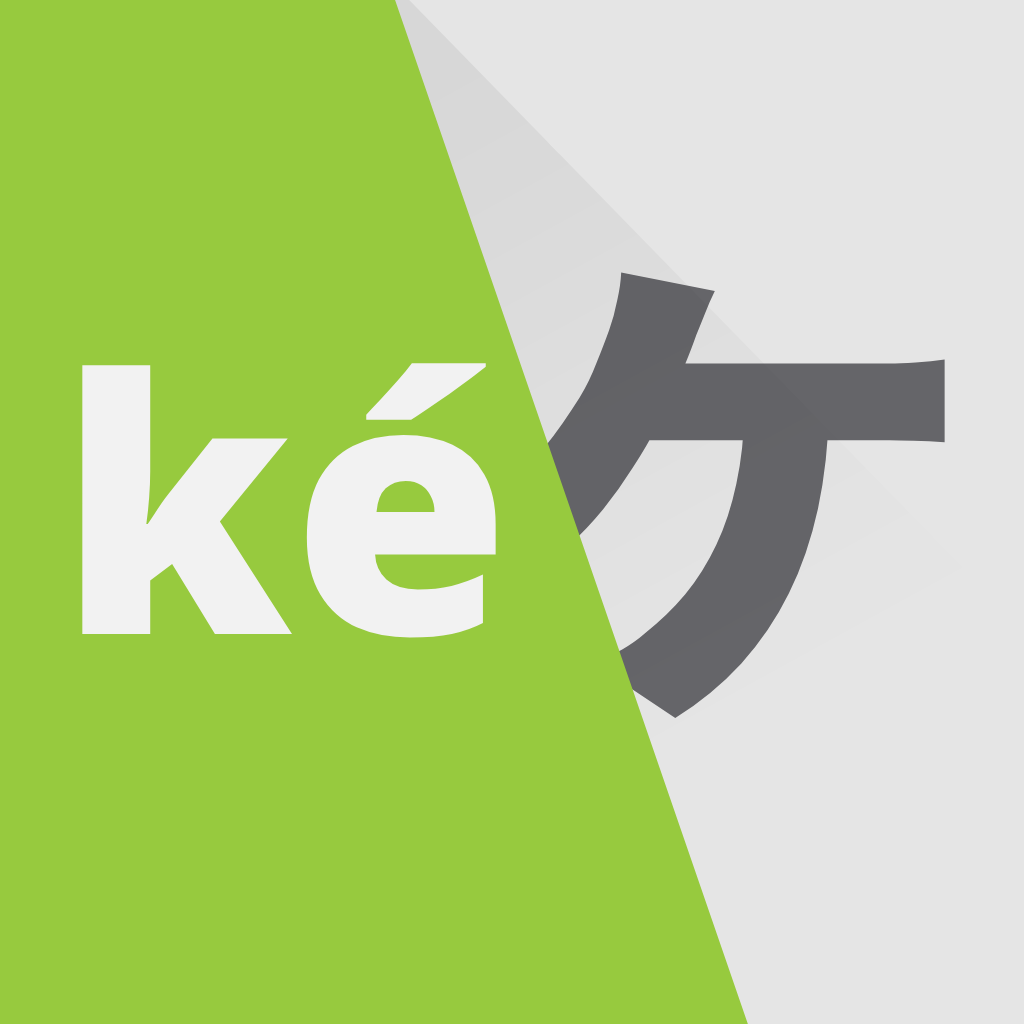
<style>
.page{position:relative;width:1024px;height:1024px;background:#97ca3e}
.page>*{position:absolute;margin:0}
.t1{font:500.7px "NotoSansJP-Black";color:#656569}
.t2{font:353.6px "NotoSans-Black";color:#f2f2f2}
</style>
<div class="page">
<p class="t1" style="left:494px;top:272px;width:451px;height:447px">ケ</p>
<p class="t2" style="left:82px;top:363px;width:414px;height:275px">ké</p>
</div>
